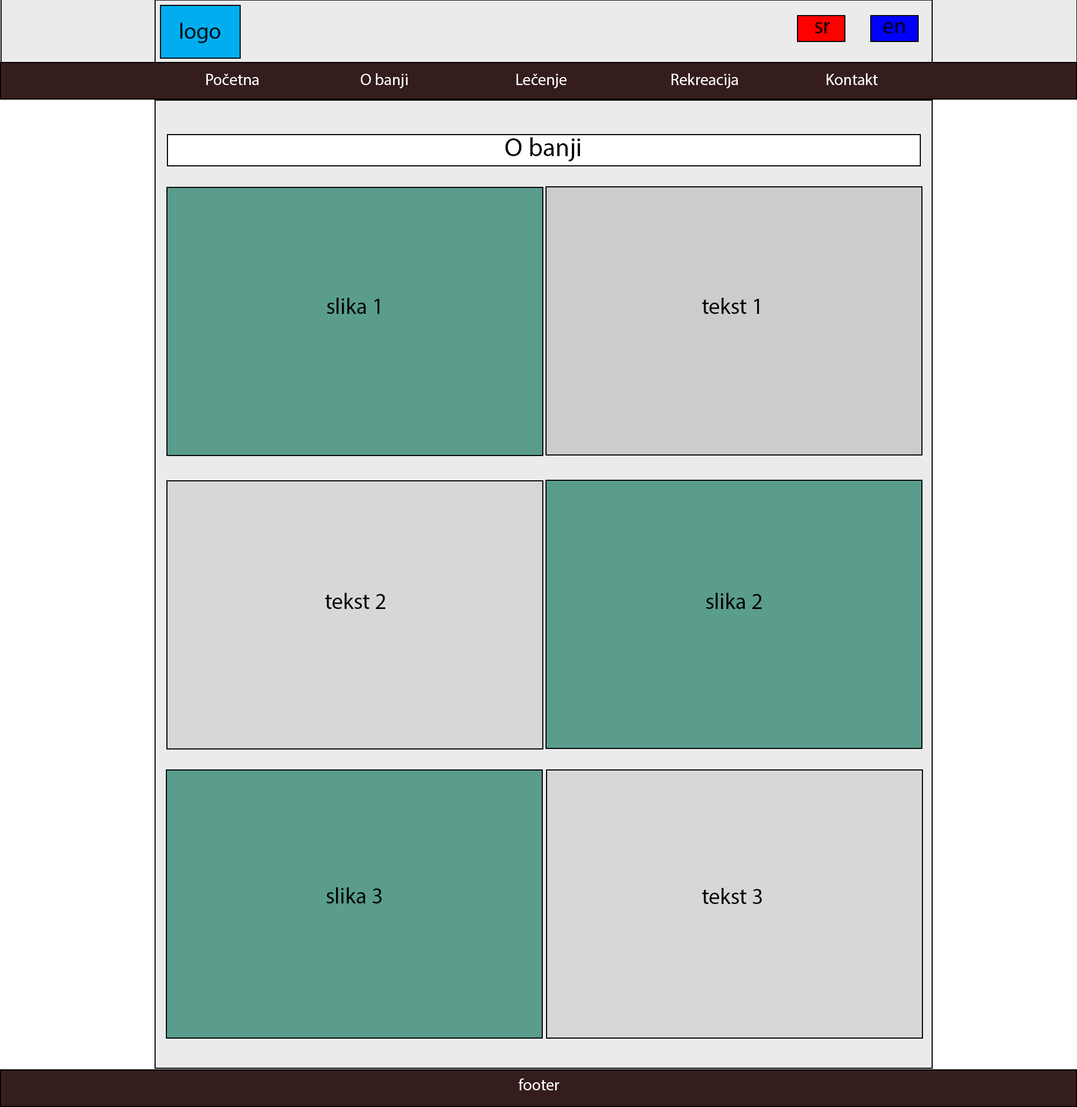
<style>
.page{position:relative;width:1077px;height:1107px;background:#ffffff}
.page>*{position:absolute;margin:0}
.t1{font:22.4px "MyriadPro-Regular";color:#000101}
.t2{font:16.2px "MyriadPro-Regular";color:#ffffff}
.t3{font:12.9px "MyriadPro-Regular";color:#000101}
.t4{font:25.8px "MyriadPro-Regular";color:#000000}
.t5{font:22.4px "MyriadPro-Regular";color:#000000}
</style>
<div class="page">
<p class="t1" style="left:180px;top:23px;width:40px;height:20px">logo</p>
<p class="t1" style="left:815px;top:22px;width:15px;height:11px">sr</p>
<p class="t1" style="left:883px;top:22px;width:22px;height:11px">en</p>
<p class="t2" style="left:206px;top:73px;width:672px;height:15px"><span class="t3">  </span>Početna      O banji      Lečenje      Rekreacija     Kontakt</p>
<p class="t4" style="left:505px;top:137px;width:76px;height:25px">O banji</p>
<p class="t5" style="left:327px;top:298px;width:53px;height:16px">slika 1</p>
<p class="t5" style="left:702px;top:298px;width:57px;height:16px">tekst 1</p>
<p class="t5" style="left:325px;top:593px;width:61px;height:16px">tekst 2</p>
<p class="t5" style="left:706px;top:593px;width:56px;height:16px">slika 2</p>
<p class="t5" style="left:326px;top:887px;width:56px;height:17px">slika 3</p>
<p class="t2" style="left:519px;top:1079px;width:41px;height:11px">footer</p>
</div>
